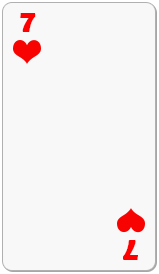
<style>
.page{position:relative;width:159px;height:274px;background:#f7f8f7}
.page>*{position:absolute;margin:0}
.t1{font:33.3px "BerlinSansFBDemi-Bold";color:#ff0000}
.t2{font:33.6px "BerlinSansFBDemi-Bold";color:#ff0000}
</style>
<div class="page">
<p class="t1" style="left:20px;top:13px;width:16px;height:19px">7</p>
<p class="t2" style="left:123px;top:240px;width:15px;height:20px;rotate:180deg">7</p>
</div>
